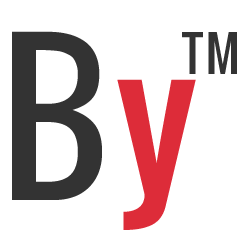
<style>
.page{position:relative;width:250px;height:250px;background:#ffffff}
.page>*{position:absolute;margin:0}
.t1{font:192px "Oswald";letter-spacing:0.05em;color:#333333}
.t2{font:192px "Oswald";letter-spacing:0.05em;color:#dd2c39}
.t3{font:48px "Oswald";letter-spacing:0.05em;color:#333333}
</style>
<div class="page">
<p class="t1" style="left:12px;top:31px;width:184px;height:199px">B<span class="t2">y</span></p>
<p class="t3" style="left:182px;top:32px;width:55px;height:42px">TM</p>
</div>
